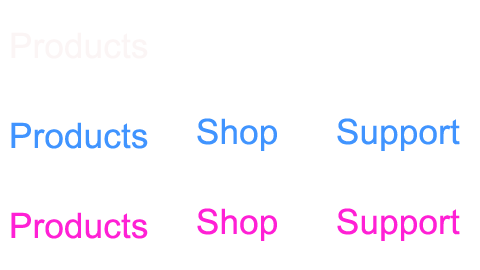
<style>
.page{position:relative;width:480px;height:270px;background:#ffffff}
.page>*{position:absolute;margin:0}
.t1{font:35px "ArialMT";letter-spacing:0.005em;color:#fbf5f5}
.t2{font:35px "ArialMT";letter-spacing:0.005em;color:#4094ff}
.t3{font:35px "ArialMT";letter-spacing:0.005em;color:#ff20d5}
</style>
<div class="page">
<p class="t1" style="left:11px;top:32px;width:137px;height:27px">Products</p>
<p class="t2" style="left:11px;top:122px;width:137px;height:27px">Products</p>
<p class="t2" style="left:197px;top:118px;width:80px;height:33px">Shop</p>
<p class="t2" style="left:337px;top:118px;width:123px;height:33px">Support</p>
<p class="t3" style="left:197px;top:208px;width:80px;height:33px">Shop</p>
<p class="t3" style="left:337px;top:208px;width:123px;height:33px">Support</p>
<p class="t3" style="left:11px;top:212px;width:137px;height:27px">Products</p>
</div>
